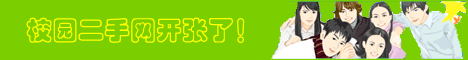
<style>
.page{position:relative;width:468px;height:60px;background:#7bce00}
.page>*{position:absolute;margin:0}
.t1{font:26px "STCaiyun";color:#ffff00}
</style>
<div class="page">
<p class="t1" style="left:26px;top:17px;width:219px;height:27px">校园二手网开张了！</p>
</div>
